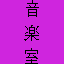
<style>
.page{position:relative;width:64px;height:64px;background:#cf25de}
.page>*{position:absolute;margin:0}
.t1{font:16.8px/24px "KozGoPr6N-Regular";color:#000000;scale:0.91 1}
</style>
<div class="page">
<p class="t1" style="left:24px;top:0px;width:15px;height:64px;text-align:center">音<br>楽<br>室</p>
</div>
